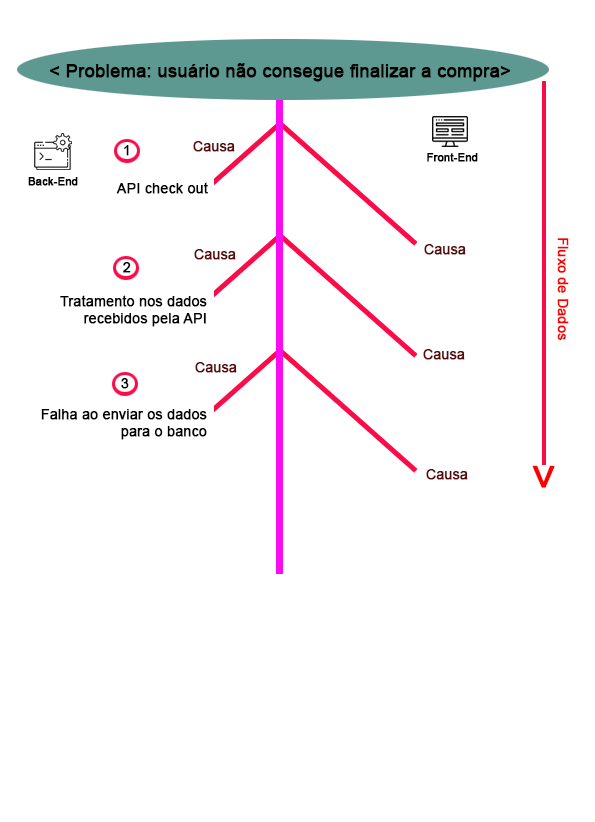
<style>
.page{position:relative;width:595px;height:822px;background:#ffffff}
.page>*{position:absolute;margin:0}
.t1{font:18px "ArialMT";color:#000000;font-weight:bold}
.t2{font:14px "ArialMT";color:#000000;font-weight:bold}
.t3{font:14px "ArialMT";color:#5a0a0a;font-weight:bold}
.t4{font:11px "ArialMT";color:#000000;font-weight:bold}
.t5{font:14.4px "ArialMT";color:#fc0000;font-weight:bold}
.t6{font:44.8px "ArialMT";color:#fc0000;font-weight:bold}
</style>
<div class="page">
<p class="t1" style="left:49px;top:63px;width:462px;height:19px">&lt;Problema: usuário não consegue finalizar a compra &gt;</p>
<p class="t2" style="left:124px;top:145px;width:5px;height:11px">1</p>
<p class="t3" style="left:193px;top:141px;width:42px;height:11px">Causa</p>
<p class="t4" style="left:427px;top:153px;width:51px;height:9px">Front-End</p>
<p class="t4" style="left:28px;top:177px;width:50px;height:9px">Back-End</p>
<p class="t2" style="left:116px;top:182px;width:92px;height:12px">API check out</p>
<p class="t3" style="left:424px;top:244px;width:42px;height:11px">Causa</p>
<p class="t5" style="left:557px;top:238px;width:12px;height:103px;rotate:90deg">Fluxo de Dados</p>
<p class="t3" style="left:194px;top:249px;width:42px;height:11px">Causa</p>
<p class="t2" style="left:123px;top:262px;width:8px;height:11px">2</p>
<p class="t2" style="left:60px;top:295px;width:147px;height:32px">Tratamento nos dados <br>recebidos pela API</p>
<p class="t3" style="left:423px;top:349px;width:42px;height:11px">Causa</p>
<p class="t3" style="left:195px;top:362px;width:42px;height:11px">Causa</p>
<p class="t2" style="left:121px;top:378px;width:8px;height:11px">3</p>
<p class="t2" style="left:41px;top:409px;width:166px;height:31px">Falha ao enviar os dados <br>para o banco</p>
<p class="t3" style="left:426px;top:469px;width:42px;height:11px">Causa</p>
<p class="t6" style="left:532px;top:465px;width:23px;height:23px;rotate:-90deg">&gt;</p>
</div>
